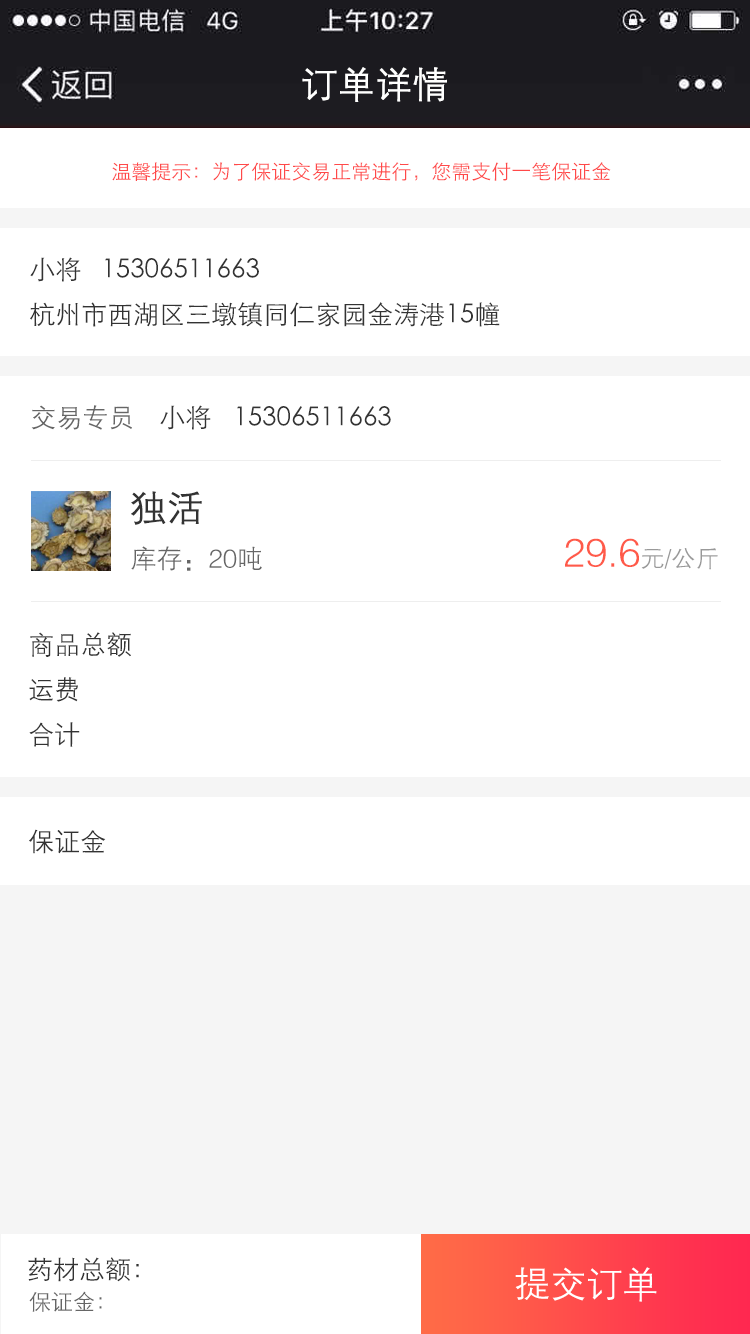
<style>
.page{position:relative;width:750px;height:1334px;background:#ffffff}
.page>*{position:absolute;margin:0}
.t1{font:36px "FZZDXJW--GB1-0";color:#ffffff;font-weight:bold}
.t2{font:20px "STXihei";color:#ff4949}
.t3{font:26px "STXihei";color:#333333}
.t4{font:26px "FZZDXJW--GB1-0";color:#666666}
.t5{font:36px "FZZDXJW--GB1-0";color:#333333;font-weight:bold}
.t6{font:40px "FZZDXJW--GB1-0";color:#ff5a49}
.t7{font:24px "FZZDXJW--GB1-0";color:#999999}
.t8{font:26px "FZZDXJW--GB1-0";color:#333333}
.t9{font:36px "FZZDXJW--GB1-0";color:#ffffff}
.t10{font:22px "STXihei";color:#666666}
</style>
<div class="page">
<p class="t1" style="left:302px;top:67px;width:145px;height:35px">订单详情</p>
<p class="t2" style="left:112px;top:162px;width:499px;height:19px">温馨提示：为了保证交易正常进行，您需支付一笔保证金</p>
<p class="t3" style="left:30px;top:257px;width:51px;height:25px">小将</p>
<p class="t3" style="left:105px;top:258px;width:154px;height:20px">15306511663</p>
<p class="t3" style="left:30px;top:302px;width:470px;height:25px">杭州市西湖区三墩镇同仁家园金涛港15幢</p>
<p class="t4" style="left:31px;top:405px;width:101px;height:25px">交易专员</p>
<p class="t3" style="left:160px;top:405px;width:51px;height:25px">小将</p>
<p class="t3" style="left:237px;top:406px;width:154px;height:20px">15306511663</p>
<p class="t5" style="left:131px;top:491px;width:71px;height:34px">独活</p>
<p class="t6" style="left:565px;top:538px;width:153px;height:32px">29.6<span class="t7">元/公斤</span></p>
<p class="t4" style="left:131px;top:546px;width:131px;height:25px">库存：20吨</p>
<p class="t8" style="left:30px;top:632px;width:101px;height:25px">商品总额</p>
<p class="t8" style="left:29px;top:677px;width:49px;height:25px">运费</p>
<p class="t8" style="left:29px;top:722px;width:51px;height:25px">合计</p>
<p class="t8" style="left:29px;top:829px;width:77px;height:25px">保证金</p>
<p class="t3" style="left:28px;top:1257px;width:111px;height:25px">药材总额：</p>
<p class="t9" style="left:515px;top:1267px;width:142px;height:35px">提交订单</p>
<p class="t10" style="left:29px;top:1291px;width:73px;height:21px">保证金：</p>
</div>
